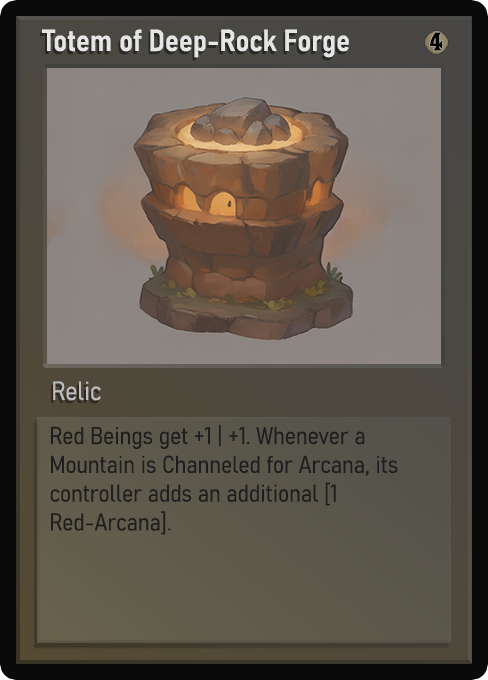
<style>
.page{position:relative;width:488px;height:680px}
.page>*{position:absolute;margin:0}
.t1{font:30px "Bahnschrift-SemiBoldSemiCondensed";color:#f2f2f2;font-weight:bold}
.t2{font:25px "WTRRoycroft";color:#000000;font-weight:bold;scale:1.09 1}
.t3{font:26px "Bahnschrift-LightSemiCondensed";color:#c8c8c8;font-weight:bold}
.t4{font:24px "Bahnschrift-LightSemiCondensed";color:#1e1e1e;font-weight:bold}
</style>
<div class="page">
<p class="t1" style="left:42px;top:29px;width:307px;height:29px;opacity:0.9">Totem of Deep-Rock Forge</p>
<p class="t2" style="left:430px;top:32px;width:13px;height:19px">4</p>
<p class="t3" style="left:53px;top:381px;width:48px;height:20px;opacity:0.9">Relic</p>
<p class="t4" style="left:50px;top:424px;width:348px;height:111px">Red Beings get +1 | +1. Whenever a Mountain is Channeled for Arcana, its controller adds an additional [1 Red-Arcana].</p>
</div>
